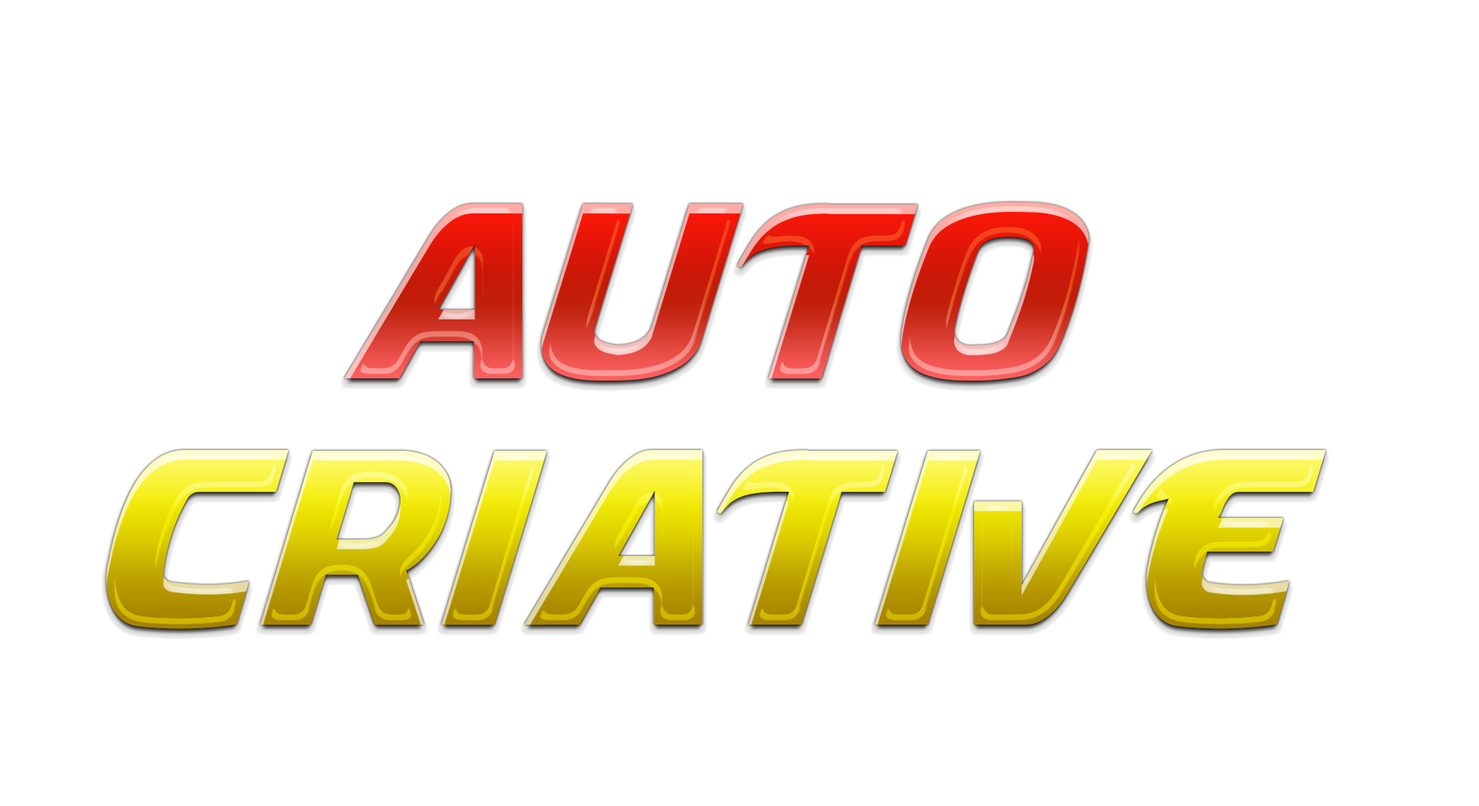
<style>
.page{position:relative;width:1479px;height:806px;background:#ffffff}
.page>*{position:absolute;margin:0}
.t1{font:233.4px "Masque"}
</style>
<div class="page">
<p class="t1" style="left:344px;top:202px;width:745px;height:179px">Auto</p>
<p class="t1" style="left:106px;top:450px;width:1219px;height:180px">Criative</p>
</div>
